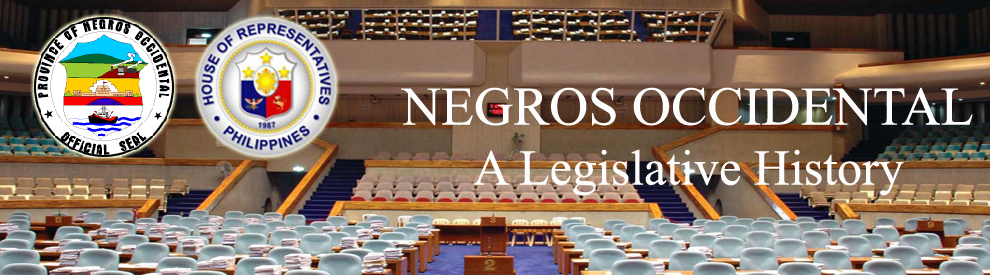
<style>
.page{position:relative;width:990px;height:275px}
.page>*{position:absolute;margin:0}
.t1{font:50px "TimesNewRomanPSMT";color:#fdfcfc}
.t2{font:54.2px "TimesNewRomanPSMT";color:#fdfdfd}
</style>
<div class="page">
<p class="t1" style="left:401px;top:87px;width:572px;height:109px;text-align:center"><span class="t2">NEGROS OCCIDENTAL<br></span>A Legislative History</p>
</div>
